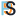
<style>
.page{position:relative;width:16px;height:16px;background:#ffffff}
.page>*{position:absolute;margin:0}
.t1{font:19.3px "AcuminConcept-Regular";letter-spacing:0.3em;color:#7fc8e1;scale:0.96 1}
.t2{font:19.3px "AcuminConcept-Regular";letter-spacing:0.3em;scale:0.96 1}
.t3{font:19.3px "AcuminConcept-Regular";letter-spacing:0.3em;color:#1c212d;scale:0.96 1}
</style>
<div class="page">
<p class="t1" style="left:1px;top:1px;width:10px;height:15px">P</p>
<p class="t2" style="left:3px;top:0px;width:10px;height:15px">9</p>
<p class="t3" style="left:5px;top:1px;width:11px;height:15px">S<br><br><br><br><br><br>S</p>
</div>
